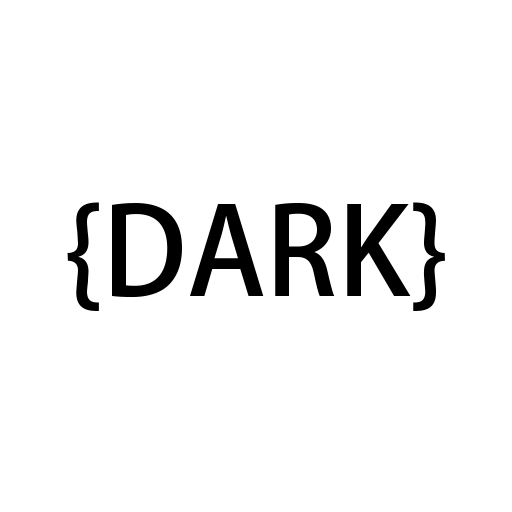
<style>
.page{position:relative;width:512px;height:512px;background:#ffffff}
.page>*{position:absolute;margin:0}
.t1{font:120px "AdobeFanHeitiStd-Bold";color:#000000}
</style>
<div class="page">
<p class="t1" style="left:67px;top:202px;width:378px;height:109px">{DARK}</p>
</div>
